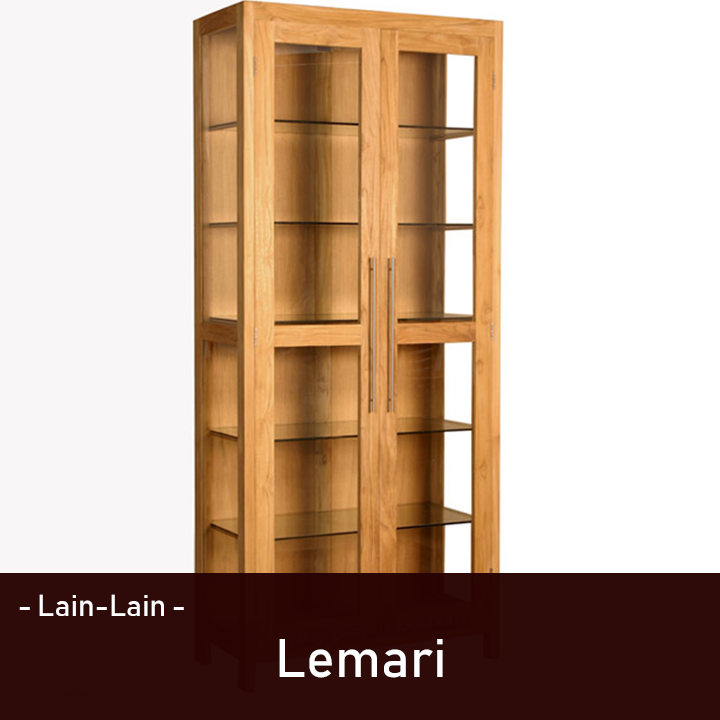
<style>
.page{position:relative;width:720px;height:720px;background:#ffffff}
.page>*{position:absolute;margin:0}
.t1{font:30px "Bahnschrift";color:#ffffff}
.t2{font:53.6px "Bahnschrift";color:#ffffff}
</style>
<div class="page">
<p class="t1" style="left:19px;top:594px;width:165px;height:22px">- Lain-Lain -</p>
<p class="t2" style="left:279px;top:639px;width:164px;height:39px">Lemari</p>
</div>
